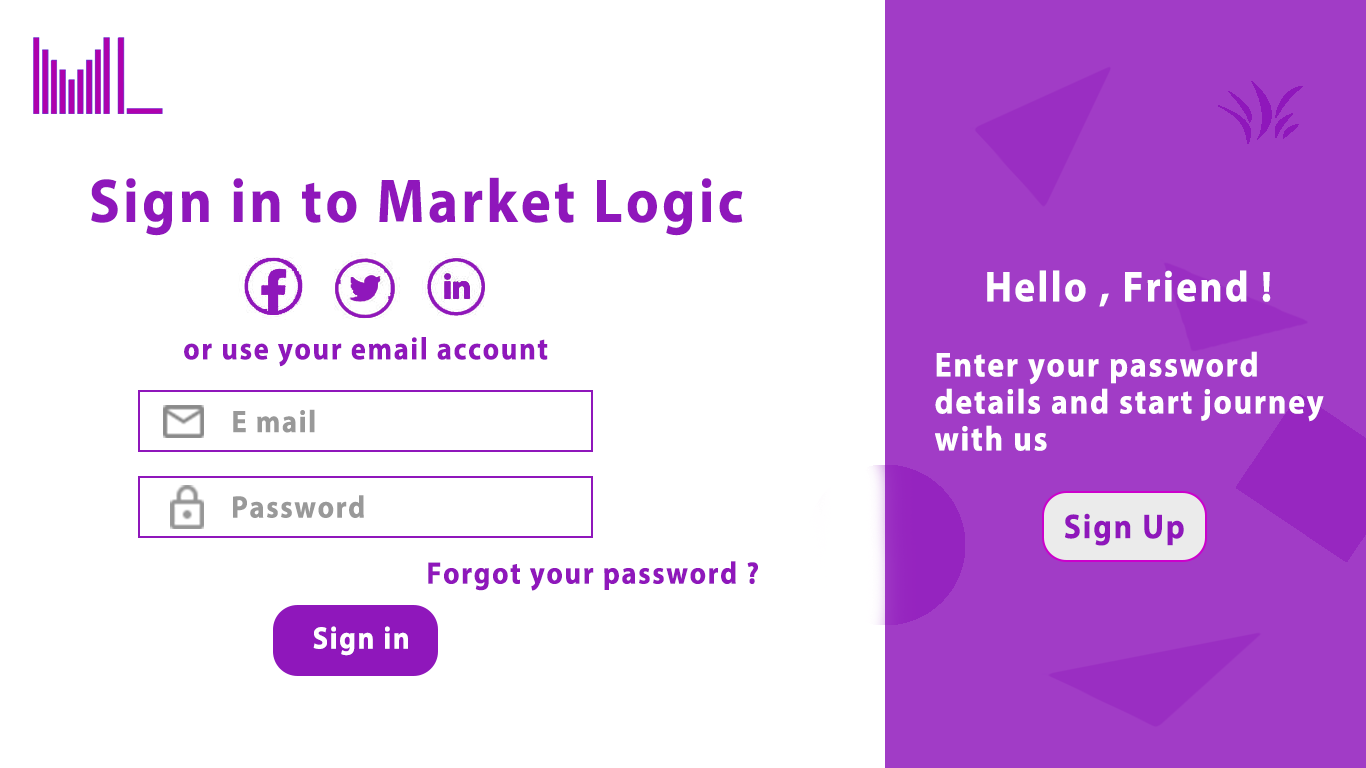
<style>
.page{position:relative;width:1366px;height:768px;background:#ffffff}
.page>*{position:absolute;margin:0}
.t1{font:62.3px "MyriadPro-Bold";letter-spacing:0.06em;color:#8f17bb;scale:0.91 1}
.t2{font:43.2px "MyriadPro-Bold";letter-spacing:0.06em;color:#ffffff;scale:0.91 1}
.t3{font:31.1px "MyriadPro-Bold";letter-spacing:0.06em;color:#8f17bb;scale:0.91 1}
.t4{font:34.6px/37px "MyriadPro-Bold";letter-spacing:0.06em;color:#ffffff;scale:0.91 1}
.t5{font:31.1px "MyriadPro-Bold";letter-spacing:0.06em;color:#999999;scale:0.91 1}
.t6{font:34.6px "MyriadPro-Bold";letter-spacing:0.06em;color:#8f17bb;scale:0.91 1}
.t7{font:31.1px "MyriadPro-Bold";letter-spacing:0.06em;color:#ffffff;scale:0.91 1}
</style>
<div class="page">
<p class="t1" style="left:91px;top:177px;width:652px;height:59px">Sign in to Market Logic</p>
<p class="t2" style="left:987px;top:270px;width:284px;height:37px">Hello , Friend !</p>
<p class="t3" style="left:184px;top:337px;width:364px;height:30px">or use your email account</p>
<p class="t4" style="left:935px;top:351px;width:389px;height:100px">Enter your password<br>details and start journey<br>with us</p>
<p class="t5" style="left:233px;top:409px;width:82px;height:24px">E mail</p>
<p class="t5" style="left:233px;top:495px;width:131px;height:23px">Password</p>
<p class="t6" style="left:1065px;top:513px;width:119px;height:33px">Sign Up</p>
<p class="t3" style="left:428px;top:561px;width:330px;height:30px">Forgot your password ?</p>
<p class="t7" style="left:313px;top:626px;width:95px;height:30px">Sign in</p>
</div>
